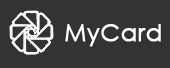
<style>
.page{position:relative;width:170px;height:68px;background:#333333}
.page>*{position:absolute;margin:0}
.t1{font:24px "CenturyGothic";color:#ffffff;font-weight:bold}
</style>
<div class="page">
<p class="t1" style="left:65px;top:24px;width:96px;height:23px">MyCard</p>
</div>
